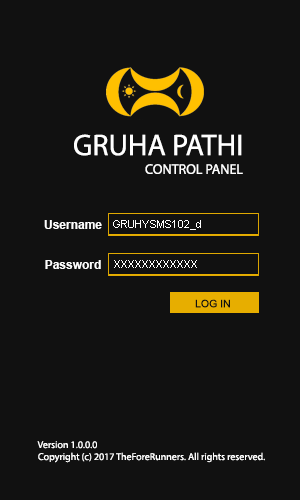
<style>
.page{position:relative;width:300px;height:500px;background:#111111}
.page>*{position:absolute;margin:0}
.t1{font:30px "MyriadPro-Regular";color:#ffffff}
.t2{font:14px "MyriadPro-Regular";color:#ffffff}
.t3{font:12px "Arial-BoldMT";color:#ffffff}
.t4{font:11px "ArialMT";color:#ffffff}
.t5{font:10.3px "ArialMT";color:#111111}
.t6{font:10px "MyriadPro-Regular";color:#ffffff}
</style>
<div class="page">
<p class="t1" style="left:74px;top:134px;width:168px;height:22px">GRUHA PATHI</p>
<p class="t2" style="left:145px;top:164px;width:98px;height:10px">CONTROL PANEL</p>
<p class="t3" style="left:44px;top:220px;width:58px;height:9px">Username</p>
<p class="t4" style="left:113px;top:220px;width:88px;height:10px">GRUHYSMS102_d</p>
<p class="t3" style="left:45px;top:260px;width:56px;height:9px">Password</p>
<p class="t4" style="left:114px;top:260px;width:83px;height:8px">XXXXXXXXXXXX</p>
<p class="t5" style="left:195px;top:299px;width:35px;height:9px">LOG IN</p>
<p class="t6" style="left:37px;top:441px;width:60px;height:8px">Version 1.0.0.0</p>
<p class="t6" style="left:38px;top:452px;width:227px;height:11px">Copyright (c) 2017 TheForeRunners. All rights reserved.</p>
</div>
